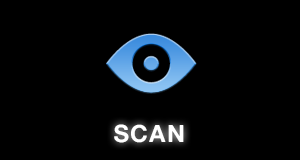
<style>
.page{position:relative;width:300px;height:160px;background:#000000}
.page>*{position:absolute;margin:0}
.t1{font:24px "AlteHaasGrotesk_Bold";letter-spacing:0.05em;color:#ffffff}
</style>
<div class="page">
<p class="t1" style="left:114px;top:124px;width:70px;height:19px">SCAN</p>
</div>
